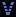
<style>
.page{position:relative;width:16px;height:17px;background:#000000}
.page>*{position:absolute;margin:0}
.t1{font:17.9px "Arial-BoldMT";color:#507dd8}
</style>
<div class="page">
<p class="t1" style="left:2px;top:2px;width:12px;height:13px">V</p>
</div>
